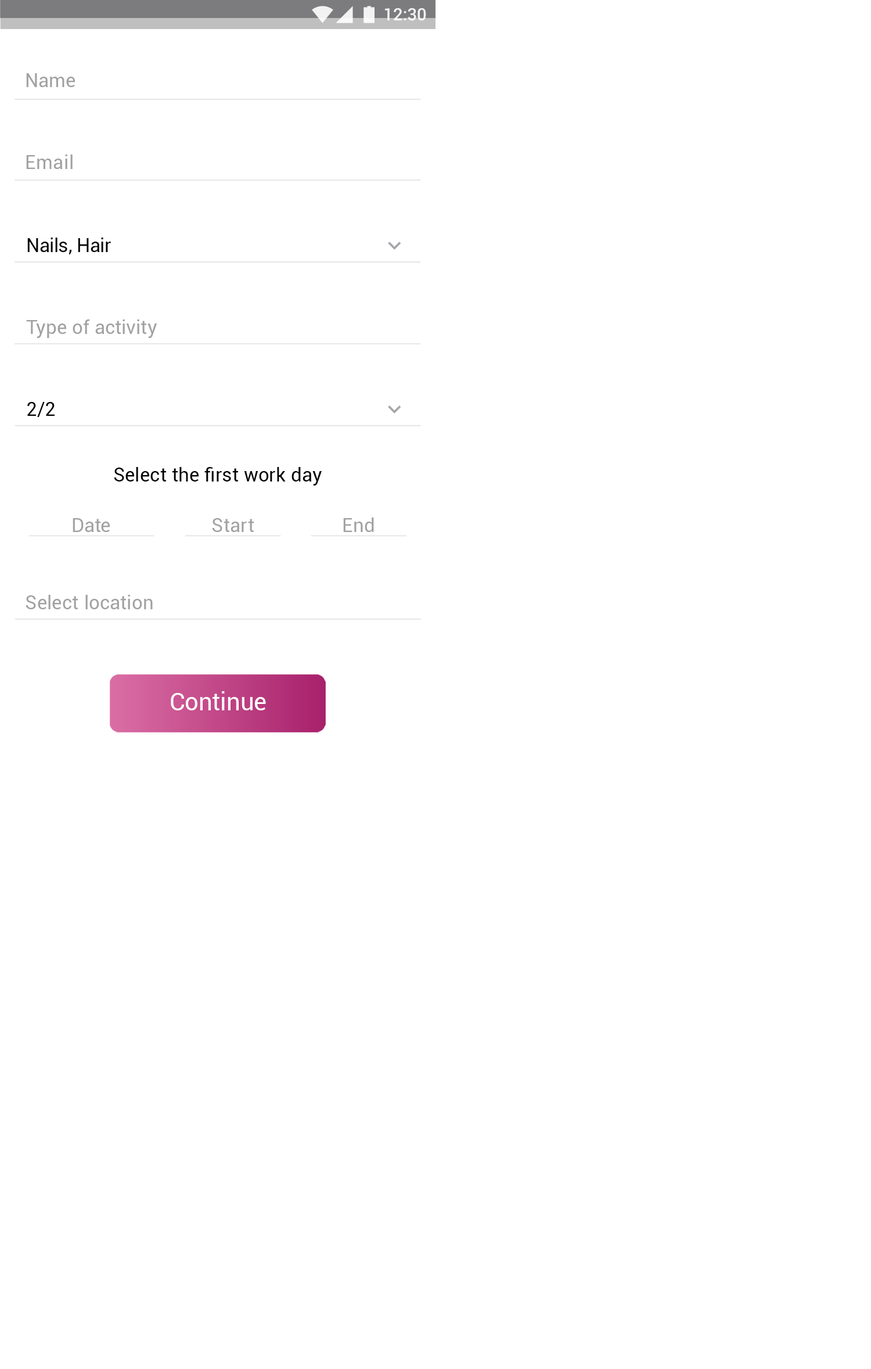
<style>
.page{position:relative;width:871px;height:1369px;background:#ffffff}
.page>*{position:absolute;margin:0}
.t1{font:16.9px "Roboto-Medium";color:#ffffff}
.t2{font:19.4px "Roboto-Regular";letter-spacing:0.01em;color:#a1a1a1}
.t3{font:19.4px "Roboto-Regular";letter-spacing:-0.005em;color:#000000}
.t4{font:19.3px "Roboto-Regular";letter-spacing:0.01em;color:#000000}
.t5{font:19.3px "Roboto-Regular";letter-spacing:0.01em;color:#a1a1a1}
.t6{font:24.2px "Roboto-Regular";color:#ffffff}
</style>
<div class="page">
<p class="t1" style="left:385px;top:8px;width:41px;height:13px">12:30</p>
<p class="t2" style="left:26px;top:73px;width:49px;height:14px">Name</p>
<p class="t2" style="left:26px;top:154px;width:47px;height:15px">Email</p>
<p class="t3" style="left:27px;top:238px;width:84px;height:16px">Nails, Hair</p>
<p class="t2" style="left:26px;top:319px;width:131px;height:19px">Type of activity</p>
<p class="t4" style="left:27px;top:402px;width:28px;height:15px">2/2</p>
<p class="t4" style="left:114px;top:467px;width:208px;height:19px">Select the first work day</p>
<p class="t5" style="left:73px;top:518px;width:37px;height:14px">Date</p>
<p class="t5" style="left:212px;top:518px;width:42px;height:14px">Start</p>
<p class="t5" style="left:343px;top:517px;width:31px;height:15px">End</p>
<p class="t5" style="left:26px;top:595px;width:127px;height:14px">Select location</p>
<p class="t6" style="left:171px;top:691px;width:95px;height:19px">Continue</p>
</div>
